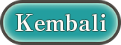
<style>
.page{position:relative;width:121px;height:45px}
.page>*{position:absolute;margin:0}
.t1{font:23px "RyuminPro-ExBold";color:#ffffff}
</style>
<div class="page">
<p class="t1" style="left:15px;top:14px;width:91px;height:17px">Kembali</p>
</div>
